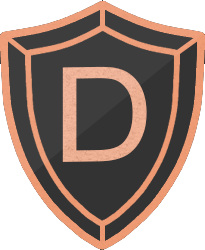
<style>
.page{position:relative;width:205px;height:250px;background:#ffffff}
.page>*{position:absolute;margin:0}
.t1{font:131.9px "ArialMT";color:#eeb195;scale:1.07 1}
</style>
<div class="page">
<p class="t1" style="left:62px;top:66px;width:85px;height:96px;rotate:-1deg">D</p>
</div>
